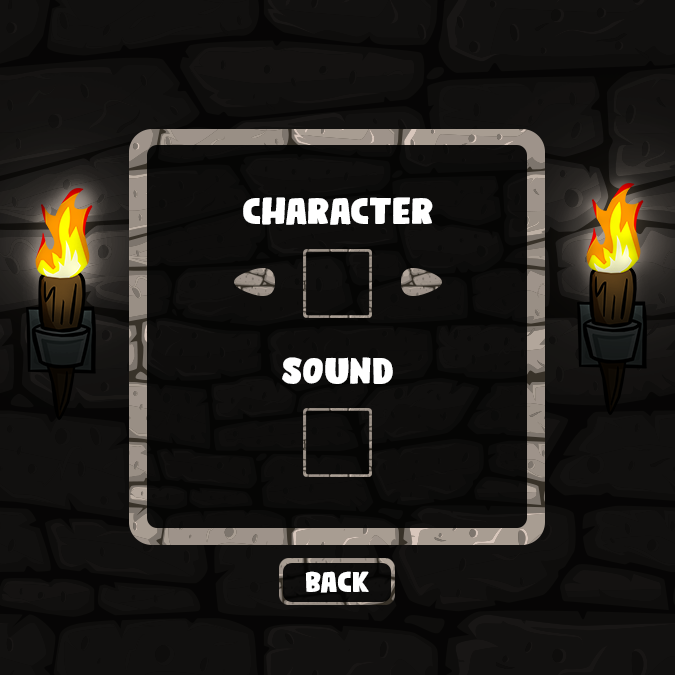
<style>
.page{position:relative;width:675px;height:675px}
.page>*{position:absolute;margin:0}
.t1{font:37.5px "BumperStickerDEMO-Regular";color:#ffffff}
.t2{font:29.2px "BumperStickerDEMO-Regular";color:#ffffff}
</style>
<div class="page">
<p class="t1" style="left:243px;top:197px;width:190px;height:28px">CHARACTER</p>
<p class="t1" style="left:282px;top:357px;width:111px;height:27px">SOUND</p>
<p class="t2" style="left:305px;top:571px;width:64px;height:22px">BACK</p>
</div>
